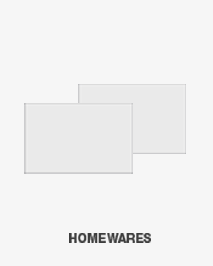
<style>
.page{position:relative;width:213px;height:266px;background:#f6f6f6}
.page>*{position:absolute;margin:0}
.t1{font:12.1px "HelveticaNeueLTStd-Hv";color:#3d3d3d}
</style>
<div class="page">
<p class="t1" style="left:69px;top:233px;width:82px;height:10px">HOMEWARES</p>
</div>
